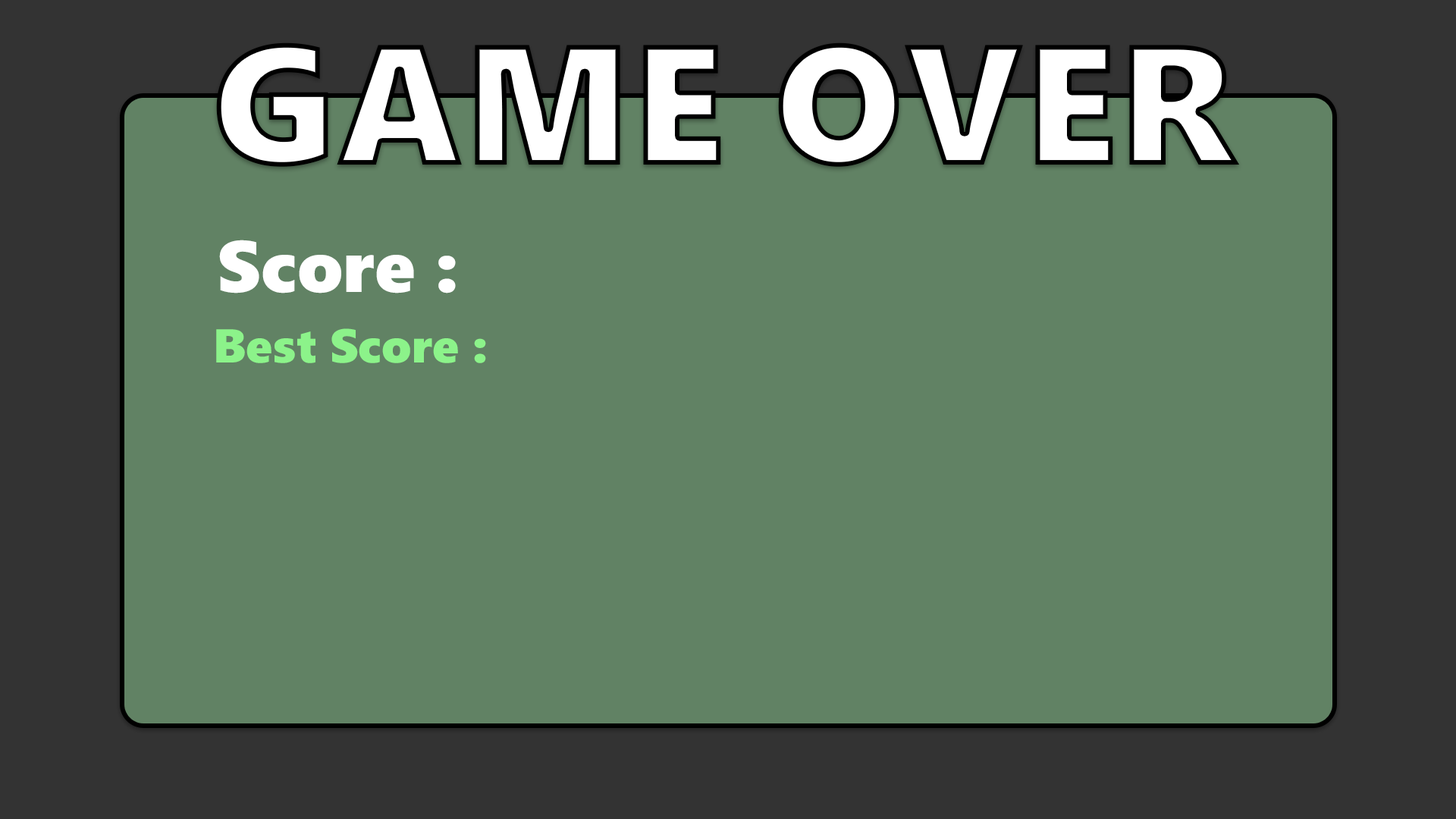
<style>
.page{position:relative;width:1456px;height:819px;background:#618264}
.page>*{position:absolute;margin:0}
.t1{font:170.6px "SegoeWP-Black";color:#ffffff}
.t2{font:72.7px "SegoeWP-Black";color:#ffffff}
.t3{font:47.4px "SegoeWP-Black";color:#8cf38a}
</style>
<div class="page">
<p class="t1" style="left:216px;top:42px;width:1024px;height:125px">GAME OVER</p>
<p class="t2" style="left:219px;top:240px;width:237px;height:53px">Score :</p>
<p class="t3" style="left:216px;top:328px;width:270px;height:35px">Best Score :</p>
</div>
